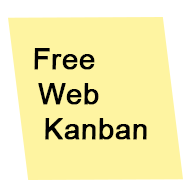
<style>
.page{position:relative;width:192px;height:192px;background:#fef4a1}
.page>*{position:absolute;margin:0}
.t1{font:29.5px "ArialMT";color:#010101;font-weight:bold;font-style:italic}
</style>
<div class="page">
<p class="t1" style="left:34px;top:48px;width:113px;height:92px">Free<br>Web<br>Kanban</p>
</div>
